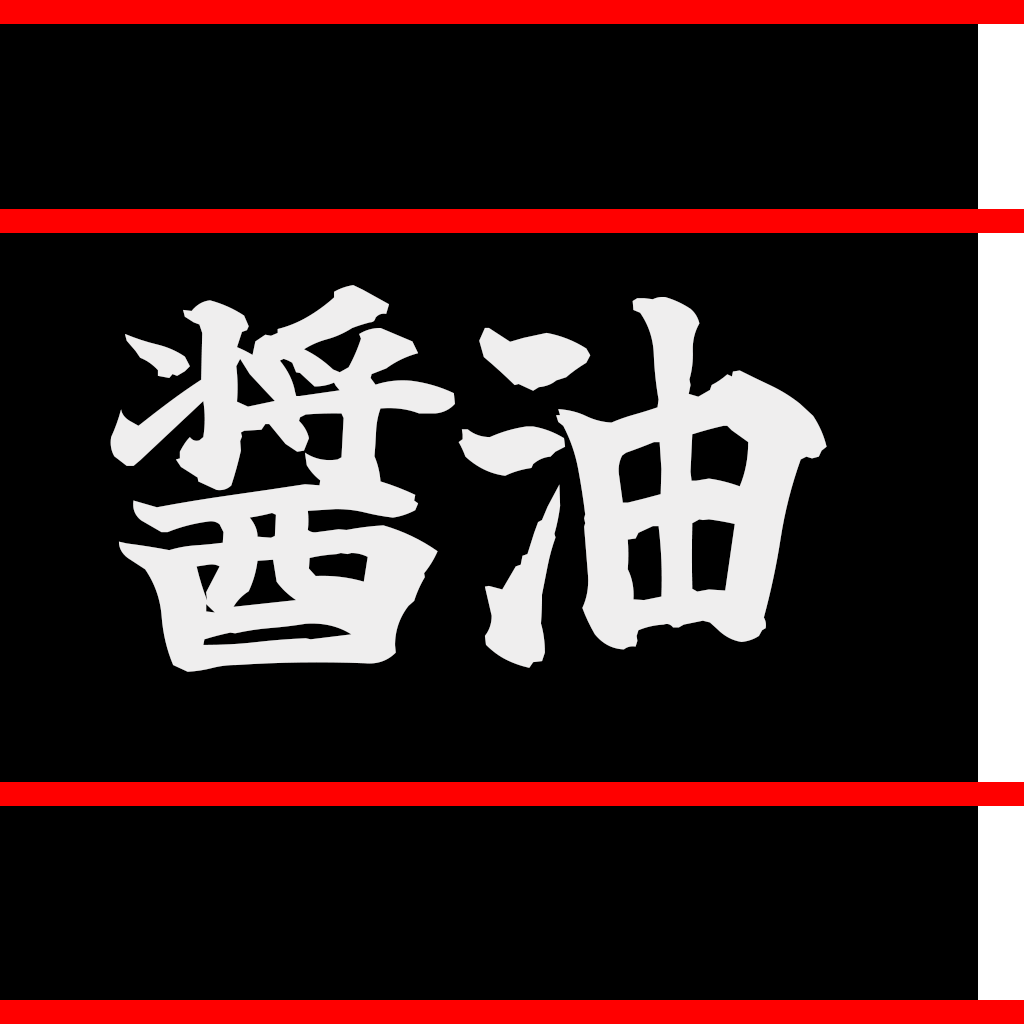
<style>
.page{position:relative;width:1024px;height:1024px;background:#000000}
.page>*{position:absolute;margin:0}
.t1{font:362.9px "Tamanegi-Kaisho-Geki-FreeVer-7";letter-spacing:-0.02em;color:#efeeee}
</style>
<div class="page">
<p class="t1" style="left:110px;top:285px;width:717px;height:387px">醤油</p>
</div>
